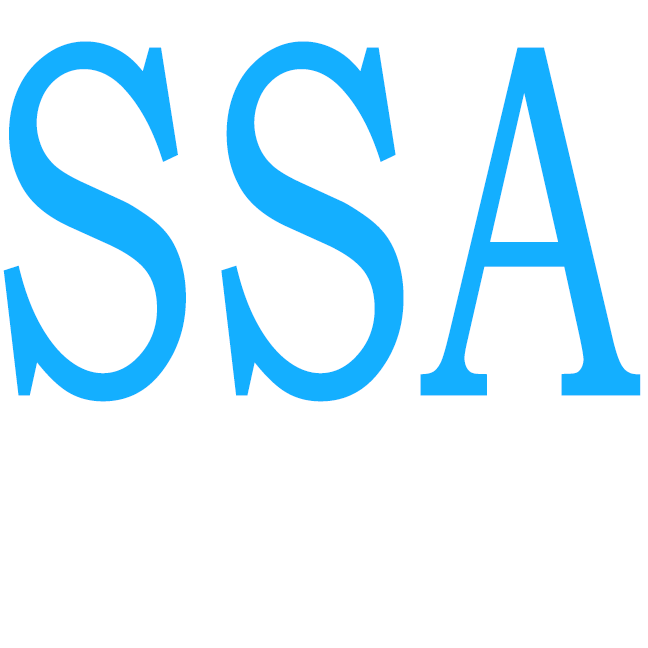
<style>
.page{position:relative;width:648px;height:648px;background:#ffffff}
.page>*{position:absolute;margin:0}
.t1{font:510.6px "BookmanOldStyle";letter-spacing:0.01em;color:#14afff;text-transform:uppercase;scale:0.64 1}
</style>
<div class="page">
<p class="t1" style="left:3px;top:41px;width:638px;height:361px">SSA</p>
</div>
